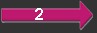
<style>
.page{position:relative;width:97px;height:33px;background:#333333}
.page>*{position:absolute;margin:0}
.t1{font:16px "Arial-BoldMT";color:#ffffff}
</style>
<div class="page">
<p class="t1" style="left:35px;top:8px;width:8px;height:12px">2</p>
</div>
